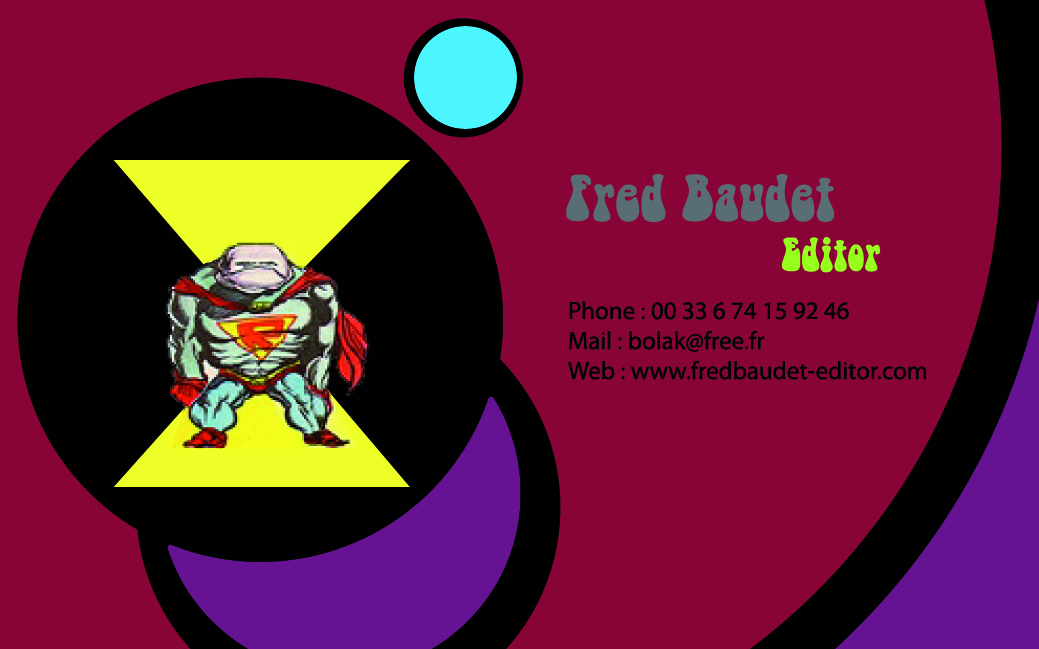
<style>
.page{position:relative;width:1039px;height:649px;background:#880436}
.page>*{position:absolute;margin:0}
.t1{font:58.3px "BellBottom.Laser";color:#586d74}
.t2{font:41.7px "BellBottom.Laser";color:#97ff1c}
.t3{font:25px "MyriadPro-Regular";color:#010101}
</style>
<div class="page">
<p class="t1" style="left:566px;top:173px;width:315px;height:100px">Fred Baudet<br>      <span class="t2">Editor</span></p>
<p class="t3" style="left:568px;top:301px;width:358px;height:79px">Phone : 00 33 6 74 15 92 46<br>Mail : bolak@free.fr<br>Web : www.fredbaudet-editor.com</p>
</div>
